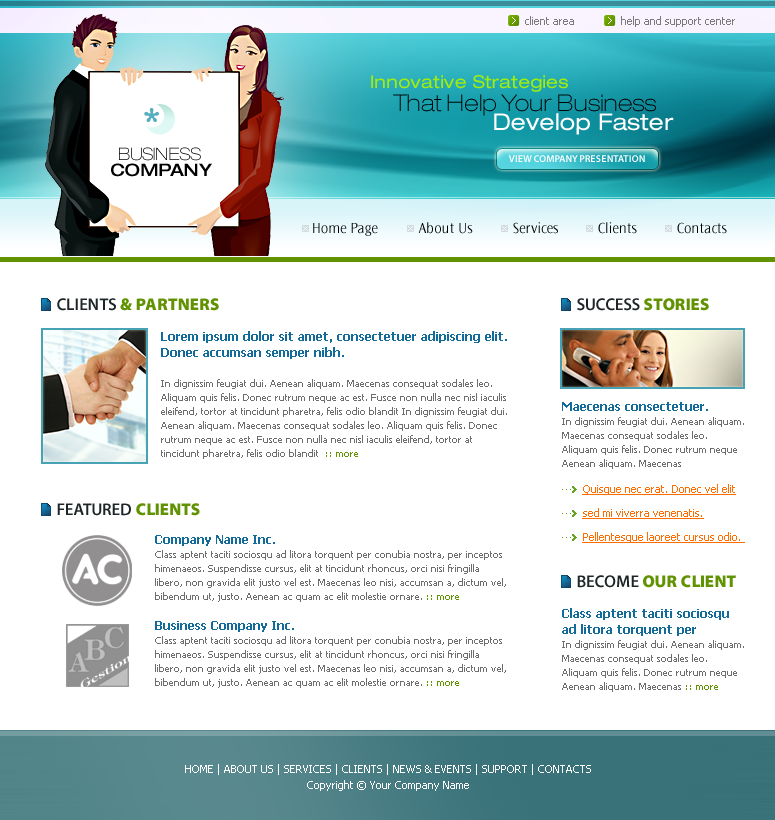
<style>
.page{position:relative;width:775px;height:820px;background:#ffffff}
.page>*{position:absolute;margin:0}
.t1{font:11px "Tahoma";color:#7b7b7b}
.t2{font:18px "HelveticaNeueLTPro-Ex";color:#a2ee09}
.t3{font:23px "HelveticaNeueLTPro-ThEx";color:#000000}
.t4{font:23px "HelveticaNeueLTPro-Ex";color:#ffffff}
.t5{font:17px/16.2px "HelveticaNeueLTPro-ThEx";color:#000000}
.t6{font:17px/16.2px "HelveticaNeueLTPro-MdEx";color:#000000}
.t7{font:10px "MyriadPro-Semibold";color:#ffffff}
.t8{font:15px "OceanSansStd-Light";color:#000000}
.t9{font:17px "MyriadPro-Black";color:#619201}
.t10{font:17px "MyriadPro-Semibold";color:#1d2527}
.t11{font:10px/14px "Tahoma";color:#6d6d6d}
.t12{font:12px/16px "Tahoma-Bold";color:#136b9b}
.t13{font:10px/14px "Tahoma";color:#619201}
.t14{font:11px/24px "Tahoma";color:#ff6c00;text-decoration:underline}
.t15{font:11px/16px "Tahoma";color:#ffffff}
</style>
<div class="page">
<p class="t1" style="left:525px;top:16px;width:49px;height:9px">client area</p>
<p class="t1" style="left:621px;top:16px;width:114px;height:11px">help and support center</p>
<p class="t2" style="left:371px;top:75px;width:197px;height:17px">Innovative Strategies</p>
<p class="t3" style="left:393px;top:94px;width:263px;height:22px">That Help Your Business</p>
<p class="t4" style="left:494px;top:113px;width:180px;height:22px">Develop Faster</p>
<p class="t5" style="left:111px;top:147px;width:101px;height:30px;text-align:center">BUSINESS<br> <span class="t6">COMPANY</span></p>
<p class="t7" style="left:508px;top:155px;width:137px;height:7px">VIEW COMPANY PRESENTATION</p>
<p class="t8" style="left:418px;top:222px;width:55px;height:12px">About Us</p>
<p class="t8" style="left:513px;top:222px;width:45px;height:12px">Services</p>
<p class="t8" style="left:598px;top:222px;width:39px;height:12px">Clients</p>
<p class="t8" style="left:677px;top:222px;width:50px;height:12px">Contacts</p>
<p class="t8" style="left:313px;top:223px;width:65px;height:13px">Home Page</p>
<p class="t9" style="left:57px;top:298px;width:162px;height:13px"><span class="t10">CLIENTS </span>&amp; PARTNERS</p>
<p class="t10" style="left:577px;top:298px;width:132px;height:13px">SUCCESS <span class="t9">STORIES</span></p>
<p class="t11" style="left:161px;top:331px;width:346px;height:128px"><span class="t12">Lorem ipsum dolor sit amet, consectetuer adipiscing elit. Donec accumsan semper nibh. <br><br></span>In dignissim feugiat dui. Aenean aliquam. Maecenas consequat sodales leo. Aliquam quis felis. Donec rutrum neque ac est. Fusce non nulla nec nisl iaculis eleifend, tortor at tincidunt pharetra, felis odio blandit In dignissim feugiat dui. Aenean aliquam. Maecenas consequat sodales leo. Aliquam quis felis. Donec rutrum neque ac est. Fusce non nulla nec nisl iaculis eleifend, tortor at tincidunt pharetra, felis odio blandit  <span class="t13">:: more</span></p>
<p class="t11" style="left:562px;top:402px;width:182px;height:67px"><span class="t12">Maecenas consectetuer.<br></span>In dignissim feugiat dui. Aenean aliquam. Maecenas consequat sodales leo. Aliquam quis felis. Donec rutrum neque Aenean aliquam. Maecenas</p>
<p class="t14" style="left:582px;top:484px;width:163px;height:59px">Quisque nec erat. Donec vel elit sed mi viverra venenatis. Pellentesque laoreet cursus odio.</p>
<p class="t10" style="left:57px;top:503px;width:143px;height:13px">FEATURED <span class="t9">CLIENTS</span></p>
<p class="t11" style="left:155px;top:535px;width:351px;height:153px"><span class="t12">Company Name Inc. <br></span>Class aptent taciti sociosqu ad litora torquent per conubia nostra, per inceptos himenaeos. Suspendisse cursus, elit at tincidunt rhoncus, orci nisi fringilla libero, non gravida elit justo vel est. Maecenas leo nisi, accumsan a, dictum vel, bibendum ut, justo. Aenean ac quam ac elit molestie ornare. <span class="t13">:: more<br><br></span><span class="t12">Business Company Inc. <br></span>Class aptent taciti sociosqu ad litora torquent per conubia nostra, per inceptos himenaeos. Suspendisse cursus, elit at tincidunt rhoncus, orci nisi fringilla libero, non gravida elit justo vel est. Maecenas leo nisi, accumsan a, dictum vel, bibendum ut, justo. Aenean ac quam ac elit molestie ornare. <span class="t13">:: more</span></p>
<p class="t9" style="left:577px;top:575px;width:159px;height:13px"><span class="t10">BECOME </span>OUR CLIENT</p>
<p class="t11" style="left:562px;top:608px;width:182px;height:84px"><span class="t12">Class aptent taciti sociosqu ad litora torquent per <br></span>In dignissim feugiat dui. Aenean aliquam. Maecenas consequat sodales leo. Aliquam quis felis. Donec rutrum neque Aenean aliquam. Maecenas <span class="t13">:: more</span></p>
<p class="t15" style="left:185px;top:764px;width:406px;height:27px;text-align:center">HOME | ABOUT US | SERVICES | CLIENTS | NEWS &amp; EVENTS | SUPPORT | CONTACTS<br>Copyright © Your Company Name</p>
</div>
